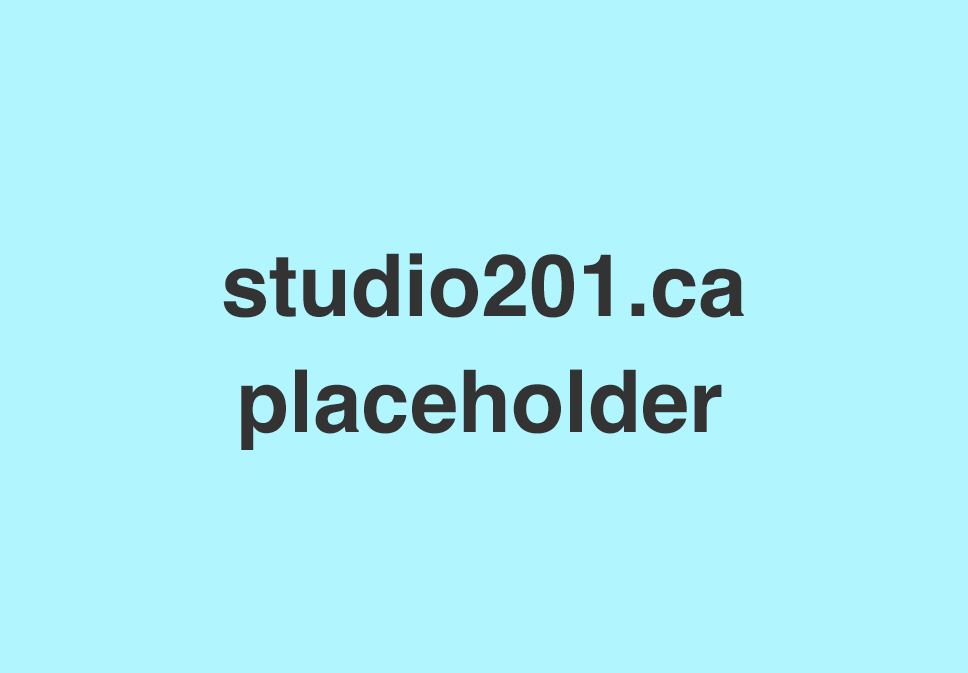
<style>
.page{position:relative;width:968px;height:673px;background:#b1f6ff}
.page>*{position:absolute;margin:0}
.t1{font:86.7px "Helvetica-Bold";color:#333333}
</style>
<div class="page">
<p class="t1" style="left:223px;top:253px;width:521px;height:65px">studio201.ca</p>
<p class="t1" style="left:241px;top:369px;width:481px;height:81px">placeholder</p>
</div>
